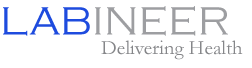
<style>
.page{position:relative;width:252px;height:68px;background:#ffffff}
.page>*{position:absolute;margin:0}
.t1{font:41.1px "CopperplateGothic-Light";color:#9d9ea1}
.t2{font:41.1px "CopperplateGothic-Light";color:#1e4bde}
.t3{font:20.6px "Garamond";color:#858689}
</style>
<div class="page">
<p class="t1" style="left:3px;top:6px;width:225px;height:30px"><span class="t2">LAB</span>INEER</p>
<p class="t3" style="left:101px;top:40px;width:142px;height:20px">Delivering Health</p>
</div>
